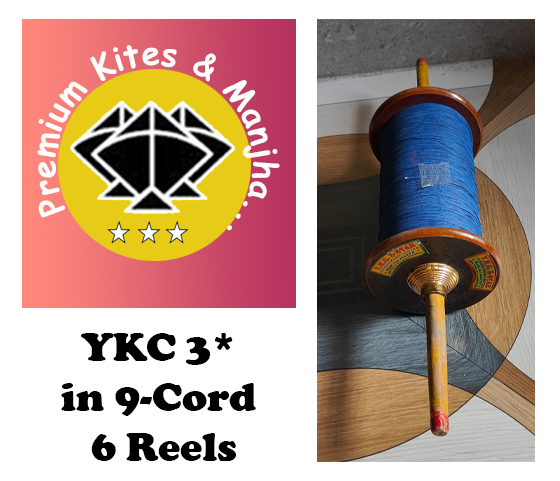
<style>
.page{position:relative;width:560px;height:481px;background:#ffffff}
.page>*{position:absolute;margin:0}
.t1{font:41.7px "CooperBlack";color:#000000}
</style>
<div class="page">
<p class="t1" style="left:61px;top:333px;width:195px;height:128px;text-align:center">YKC 3*<br>in 9-Cord<br> 6 Reels</p>
</div>
